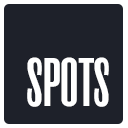
<style>
.page{position:relative;width:128px;height:128px;background:#1e212a}
.page>*{position:absolute;margin:0}
.t1{font:59.9px "RoswellFourITCTT";color:#ffffff}
</style>
<div class="page">
<p class="t1" style="left:27px;top:57px;width:82px;height:50px">SPOTS</p>
</div>
